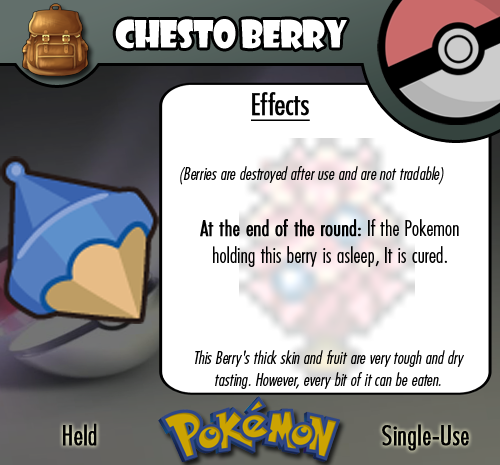
<style>
.page{position:relative;width:500px;height:465px;background:#ffffff}
.page>*{position:absolute;margin:0}
.t1{font:36.7px "ShowcardGothic-Reg";letter-spacing:-0.025em;color:#ffffff;scale:0.91 1}
.t2{font:22.2px "FuturaCondensedBQ-Light";color:#010101}
.t3{font:27.8px "FuturaCondensedBQ-Light";color:#010101;font-weight:bold}
.t4{font:30.6px "FuturaCondensedBQ-Light";color:#010101;font-weight:bold;text-decoration:underline}
.t5{font:18.1px "FuturaCondensedBQ-Light";color:#010101;font-style:italic}
.t6{font:22.2px "FuturaCondensedBQ-Light";color:#010101;font-weight:bold}
</style>
<div class="page">
<p class="t1" style="left:115px;top:19px;width:232px;height:31px">Chesto Berry</p>
<p class="t2" style="left:180px;top:92px;width:279px;height:175px"><span class="t3">  </span><span class="t4">Effects<br><br><br></span><span class="t5">(Berries are destroyed after use and are not tradable)<br><br><br><br></span><span class="t6">At the end of the round:</span> If the Pokemon holding this berry is asleep, It is cured.</p>
<p class="t5" style="left:195px;top:350px;width:269px;height:39px;text-align:center">This Berry's thick skin and fruit are very tough and dry tasting. However, every bit of it can be eaten.</p>
<p class="t3" style="left:63px;top:423px;width:34px;height:23px">Held</p>
<p class="t3" style="left:382px;top:424px;width:87px;height:27px">Single-Use</p>
</div>
